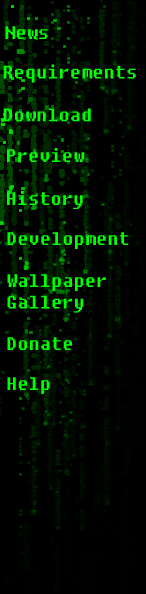
<style>
.page{position:relative;width:146px;height:594px;background:#000000}
.page>*{position:absolute;margin:0}
.t1{font:18px "Fixedsys";color:#00ff00}
</style>
<div class="page">
<p class="t1" style="left:5px;top:26px;width:43px;height:13px">News</p>
<p class="t1" style="left:3px;top:64px;width:133px;height:19px">Requirements</p>
<p class="t1" style="left:3px;top:108px;width:88px;height:14px">Download</p>
<p class="t1" style="left:7px;top:148px;width:78px;height:14px">Preview</p>
<p class="t1" style="left:7px;top:191px;width:76px;height:18px">History</p>
<p class="t1" style="left:7px;top:232px;width:122px;height:17px">Development</p>
<p class="t1" style="left:7px;top:274px;width:99px;height:39px">Wallpaper Gallery</p>
<p class="t1" style="left:7px;top:337px;width:65px;height:13px">Donate</p>
<p class="t1" style="left:7px;top:377px;width:43px;height:17px">Help</p>
</div>
